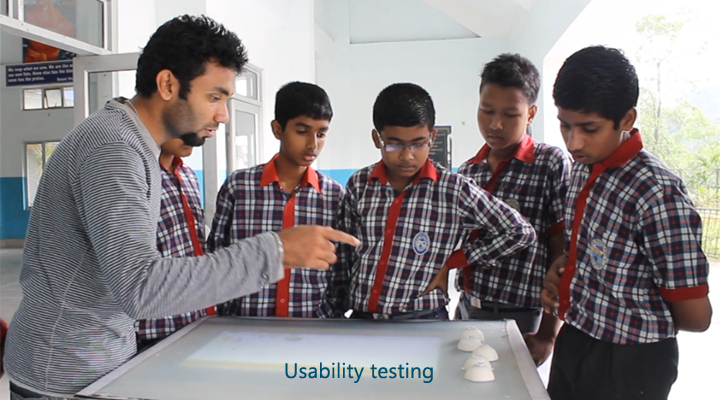
<style>
.page{position:relative;width:720px;height:400px}
.page>*{position:absolute;margin:0}
.t1{font:20.8px "SegoeUI";letter-spacing:0.01em;color:#004e6f}
</style>
<div class="page">
<p class="t1" style="left:285px;top:362px;width:148px;height:21px">Usability testing</p>
</div>
